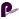
<style>
.page{position:relative;width:19px;height:19px;background:#ffffff}
.page>*{position:absolute;margin:0}
.t1{font:22.6px "Bauhaus93";color:#380038;scale:0.96 1}
</style>
<div class="page">
<p class="t1" style="left:1px;top:2px;width:11px;height:15px">P</p>
</div>
